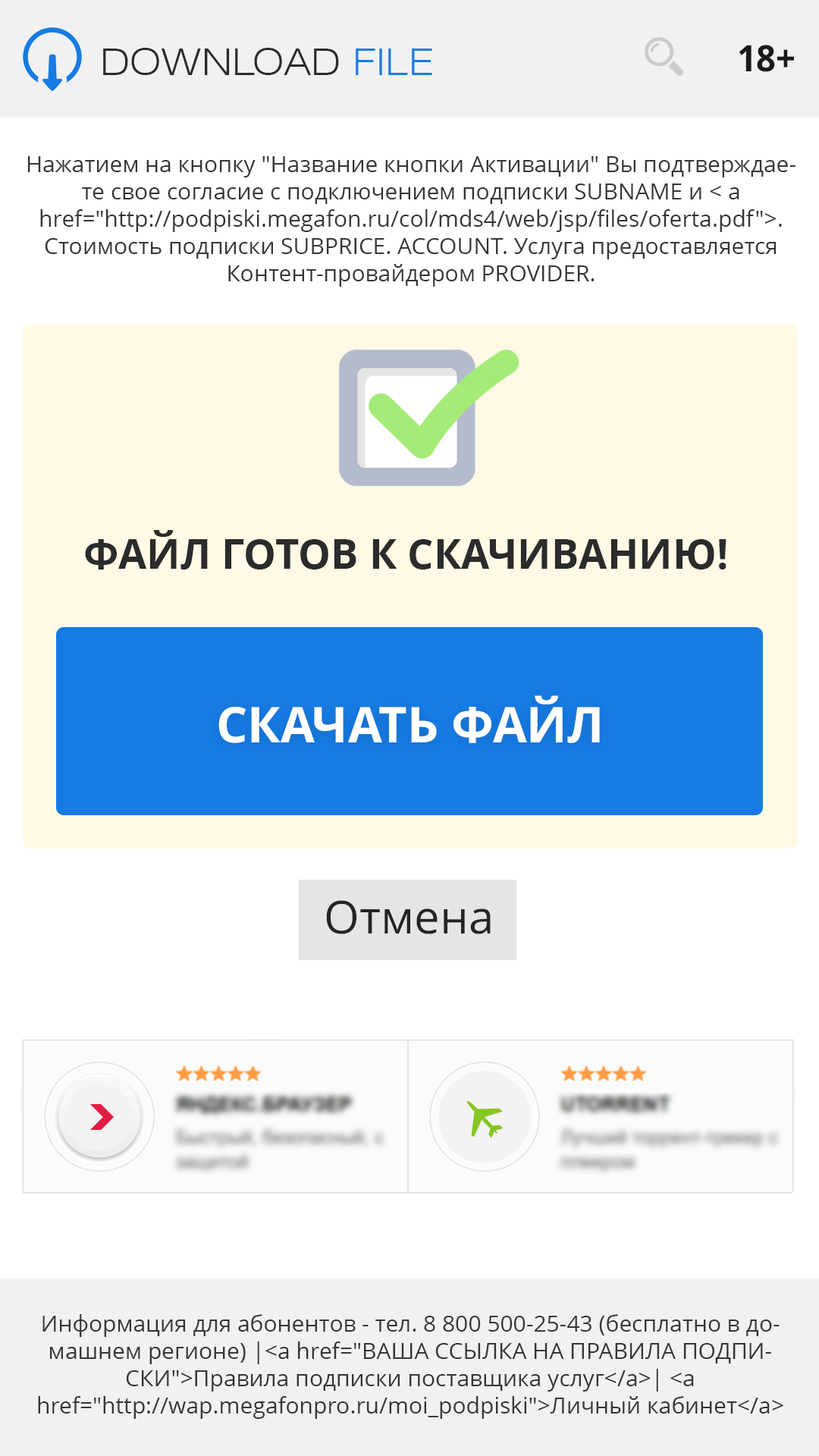
<style>
.page{position:relative;width:819px;height:1456px;background:#ffffff}
.page>*{position:absolute;margin:0}
.t1{font:36.4px "Swiss721BT-LightExtended";color:#2b2b2b;text-transform:uppercase}
.t2{font:36.4px "Swiss721BT-LightExtended";color:#167be3;text-transform:uppercase}
.t3{font:36.4px "OpenSans-Bold";color:#1a1a1a;text-transform:uppercase;scale:0.94 1}
.t4{font:22.7px/27.3px "OpenSans";color:#363636}
.t5{font:41.1px "OpenSans-Bold";color:#2b2b2b;text-transform:uppercase}
.t6{font:49.3px "OpenSans-Bold";color:#ffffff;text-transform:uppercase}
.t7{font:45.5px "OpenSans";color:#242424}
</style>
<div class="page">
<p class="t1" style="left:103px;top:48px;width:329px;height:27px">download <span class="t2">file</span></p>
<p class="t3" style="left:739px;top:45px;width:55px;height:27px">18+</p>
<p class="t4" style="left:27px;top:156px;width:768px;height:131px;text-align:center">Нажатием на кнопку "Название кнопки Активации" Вы подтверждаете свое согласие с подключением подписки SUBNAME и &lt; a href="http://podpiski.megafon.ru/col/mds4/web/jsp/files/oferta.pdf"&gt;. Стоимость подписки SUBPRICE. ACCOUNT. Услуга предоставляется Контент-провайдером PROVIDER.</p>
<p class="t5" style="left:85px;top:530px;width:641px;height:40px">Файл готов к скачиванию!</p>
<p class="t6" style="left:218px;top:695px;width:382px;height:48px">Скачать файл</p>
<p class="t7" style="left:326px;top:900px;width:165px;height:34px">Отмена</p>
<p class="t4" style="left:38px;top:1314px;width:745px;height:105px;text-align:center">Информация для абонентов - тел. 8 800 500-25-43 (бесплатно в домашнем регионе) |&lt;a href="ВАША ССЫЛКА НА ПРАВИЛА ПОДПИСКИ"&gt;Правила подписки поставщика услуг&lt;/a&gt;| &lt;a href="http://wap.megafonpro.ru/moi_podpiski"&gt;Личный кабинет&lt;/a&gt;</p>
</div>
